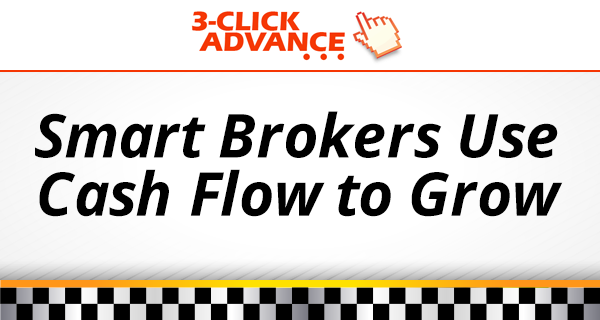
<style>
.page{position:relative;width:600px;height:320px;background:#ffffff}
.page>*{position:absolute;margin:0}
.t1{font:60.4px/58.2px "OpenSans-BoldItalic";color:#000000}
</style>
<div class="page">
<p class="t1" style="left:35px;top:111px;width:528px;height:106px;text-align:center">Smart Brokers Use<br>Cash Flow to Grow</p>
</div>
